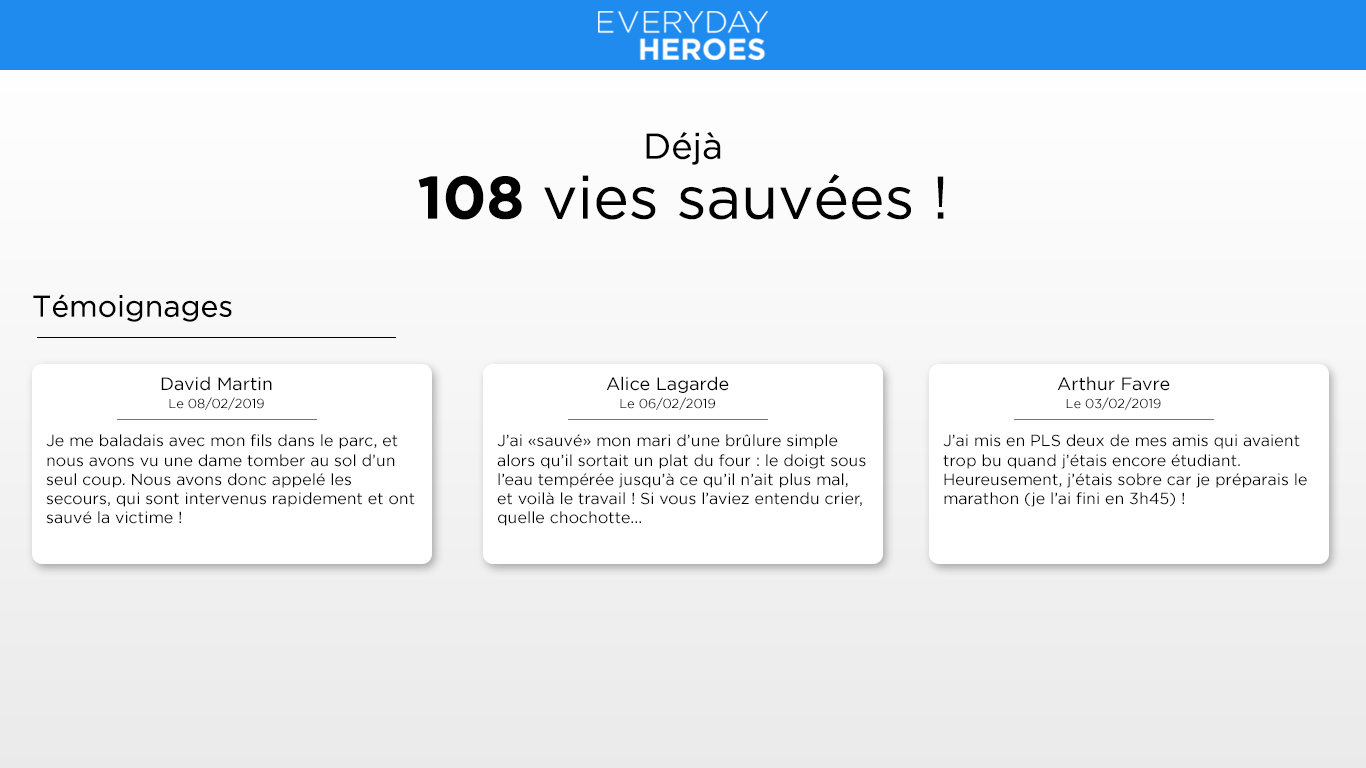
<style>
.page{position:relative;width:1366px;height:768px;background:#ffffff}
.page>*{position:absolute;margin:0}
.t1{font:36px "Gotham-Book";color:#000000}
.t2{font:60px "Gotham-Book";color:#000000}
.t3{font:60px "Gotham-Bold";color:#000000}
.t4{font:30px "Gotham-Book";color:#000000}
.t5{font:18px "Gotham-Book";color:#000000}
.t6{font:13px "Gotham-Book";color:#000000}
.t7{font:16px "Gotham-Book";color:#000000}
</style>
<div class="page">
<p class="t1" style="left:646px;top:132px;width:75px;height:33px">Déjà</p>
<p class="t2" style="left:418px;top:174px;width:526px;height:46px"><span class="t3">108</span> vies sauvées !</p>
<p class="t4" style="left:33px;top:294px;width:199px;height:28px">Témoignages</p>
<p class="t5" style="left:161px;top:376px;width:111px;height:15px">David Martin</p>
<p class="t5" style="left:606px;top:376px;width:123px;height:17px">Alice Lagarde</p>
<p class="t5" style="left:1057px;top:376px;width:113px;height:15px">Arthur Favre</p>
<p class="t6" style="left:169px;top:397px;width:95px;height:13px">Le 08/02/2019</p>
<p class="t6" style="left:620px;top:397px;width:95px;height:13px">Le 06/02/2019</p>
<p class="t6" style="left:1066px;top:397px;width:95px;height:13px">Le 03/02/2019</p>
<p class="t7" style="left:46px;top:434px;width:369px;height:90px">Je me baladais avec mon fils dans le parc, et nous avons vu une dame tomber au sol d’un seul coup. Nous avons donc appelé les <br>secours, qui sont intervenus rapidement et ont sauvé la victime !</p>
<p class="t7" style="left:497px;top:434px;width:369px;height:92px">J’ai «sauvé» mon mari d’une brûlure simple alors qu’il sortait un plat du four : le doigt sous l’eau tempérée jusqu’à ce qu’il n’ait plus mal, et voilà le travail ! Si vous l’aviez entendu crier, quelle chochotte...</p>
<p class="t7" style="left:943px;top:434px;width:364px;height:73px">J’ai mis en PLS deux de mes amis qui avaient trop bu quand j’étais encore étudiant. <br>Heureusement, j’étais sobre car je préparais le marathon (je l’ai fini en 3h45) !</p>
</div>
